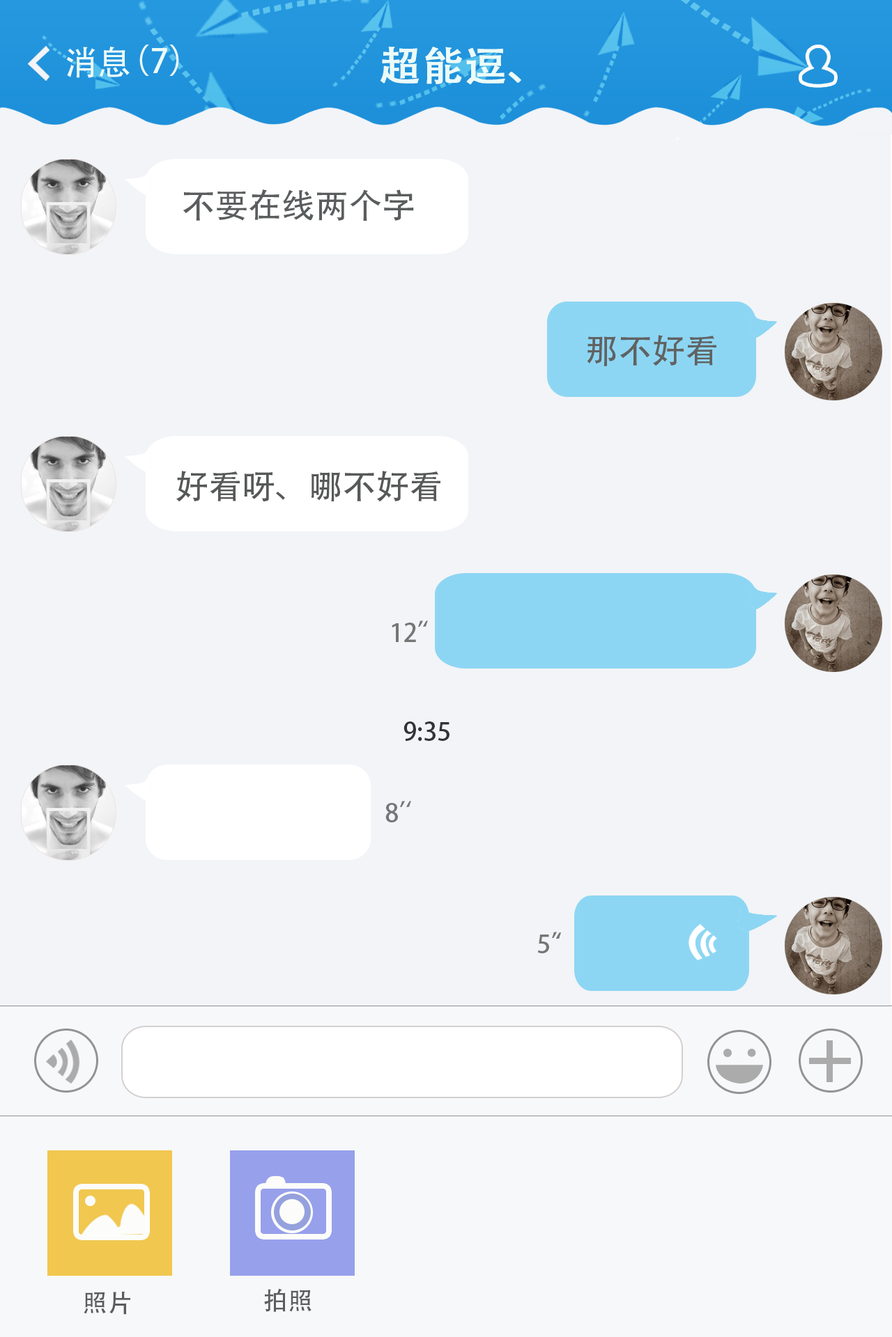
<style>
.page{position:relative;width:892px;height:1337px;background:#f2f4f7}
.page>*{position:absolute;margin:0}
.t1{font:33.4px "AdobeHeitiStd-Regular";color:#ebfbf8}
.t2{font:41.8px "AdobeHeitiStd-Regular";color:#ebfbf8;font-weight:bold}
.t3{font:33.4px "AdobeHeitiStd-Regular";color:#5a5d5e}
.t4{font:33.4px "AdobeHeitiStd-Regular";color:#616262}
.t5{font:33.4px "AdobeHeitiStd-Regular";color:#575858}
.t6{font:25.1px "AdobeHeitiStd-Regular";color:#757676}
.t7{font:25.1px "AdobeHeitiStd-Regular";color:#2f3534}
.t8{font:25.1px "AdobeHeitiStd-Regular";color:#5a5d5e}
</style>
<div class="page">
<p class="t1" style="left:66px;top:46px;width:64px;height:32px">消息</p>
<p class="t1" style="left:139px;top:45px;width:40px;height:31px">（7）</p>
<p class="t2" style="left:380px;top:47px;width:141px;height:37px">超能逗、</p>
<p class="t3" style="left:182px;top:189px;width:232px;height:32px">不要在线两个字</p>
<p class="t4" style="left:587px;top:335px;width:129px;height:31px">那不好看</p>
<p class="t5" style="left:176px;top:471px;width:264px;height:31px">好看呀、哪不好看</p>
<p class="t6" style="left:391px;top:621px;width:32px;height:21px">12’</p>
<p class="t6" style="left:423px;top:621px;width:5px;height:6px">‘</p>
<p class="t7" style="left:403px;top:722px;width:46px;height:19px">9:35</p>
<p class="t6" style="left:385px;top:801px;width:20px;height:22px">8’</p>
<p class="t6" style="left:406px;top:801px;width:5px;height:6px">‘</p>
<p class="t6" style="left:537px;top:932px;width:20px;height:22px">5’</p>
<p class="t6" style="left:556px;top:933px;width:5px;height:6px">‘</p>
<p class="t6" style="left:556px;top:933px;width:5px;height:6px">‘</p>
<p class="t8" style="left:264px;top:1289px;width:47px;height:23px">拍照</p>
<p class="t8" style="left:84px;top:1291px;width:46px;height:24px">照片</p>
</div>
